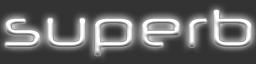
<style>
.page{position:relative;width:256px;height:64px;background:#333333}
.page>*{position:absolute;margin:0}
.t1{font:52px "NeuropolXFree"}
</style>
<div class="page">
<p class="t1" style="left:5px;top:9px;width:247px;height:47px">superb</p>
</div>
